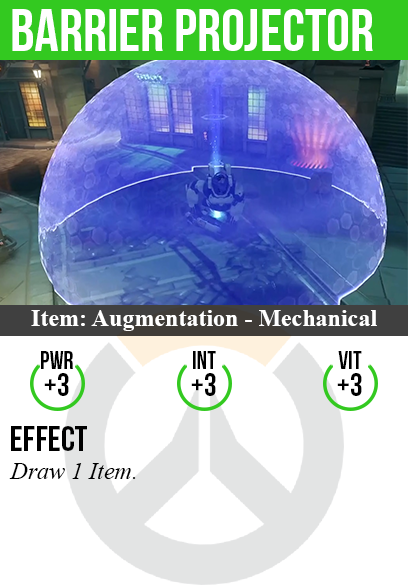
<style>
.page{position:relative;width:408px;height:585px;background:#ffffff}
.page>*{position:absolute;margin:0}
.t1{font:60px "BebasNeue";color:#ffffff}
.t2{font:24px "TimesNewRomanPS-BoldMT";color:#ffffff}
.t3{font:25px "BebasNeue";color:#000000}
.t4{font:32px "BebasNeue";color:#000000}
.t5{font:36px "BebasNeue";color:#000000}
.t6{font:24px "TimesNewRomanPS-ItalicMT";color:#000000}
</style>
<div class="page">
<p class="t1" style="left:12px;top:9px;width:361px;height:42px">barrier projector</p>
<p class="t2" style="left:31px;top:310px;width:346px;height:21px">Item: Augmentation - Mechanical</p>
<p class="t3" style="left:41px;top:351px;width:32px;height:18px">pwr</p>
<p class="t3" style="left:193px;top:351px;width:23px;height:18px">INT</p>
<p class="t3" style="left:338px;top:351px;width:24px;height:18px">vit</p>
<p class="t4" style="left:44px;top:373px;width:25px;height:23px">+3</p>
<p class="t4" style="left:191px;top:373px;width:25px;height:23px">+3</p>
<p class="t4" style="left:337px;top:373px;width:25px;height:23px">+3</p>
<p class="t5" style="left:11px;top:426px;width:76px;height:25px">Effect</p>
<p class="t6" style="left:9px;top:463px;width:127px;height:16px">Draw 1 Item.</p>
</div>
